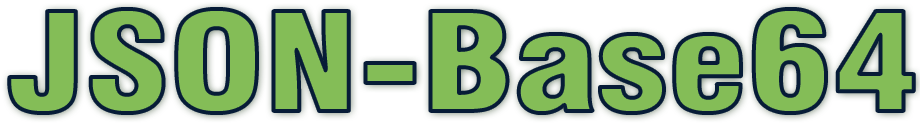
<style>
.page{position:relative;width:920px;height:125px;background:#84bd57}
.page>*{position:absolute;margin:0}
.t1{font:133.2px "Swiss721BT-BlackCondensed";color:#84bd57;scale:1.2 1}
</style>
<div class="page">
<p class="t1" style="left:9px;top:9px;width:905px;height:104px">JSON-Base64</p>
</div>
